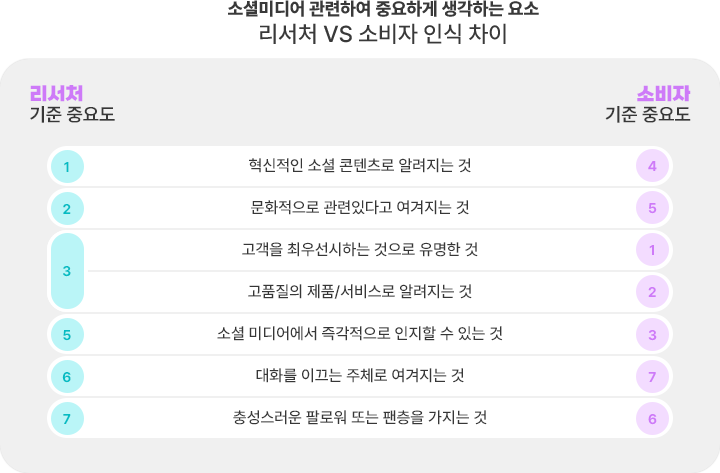
<style>
.page{position:relative;width:720px;height:473px;background:#ffffff}
.page>*{position:absolute;margin:0}
.t1{font:18px "Pretendard-ExtraBold";color:#393939;text-transform:uppercase}
.t2{font:22.9px "Pretendard-Medium";color:#393939;text-transform:uppercase}
.t3{font:18.8px "Pretendard-SemiBold";color:#373737;text-transform:uppercase}
.t4{font:18.8px "SBAggroB";color:#ce7af8;text-transform:uppercase}
.t5{font:16px/42px "Pretendard-Medium";color:#373737;text-transform:uppercase}
.t6{font:14px "Pretendard-Bold";color:#ce7af8}
.t7{font:14px "Pretendard-Bold";color:#04bcc3}
</style>
<div class="page">
<p class="t1" style="left:228px;top:0px;width:311px;height:44px;text-align:center">소셜미디어 관련하여 중요하게 생각하는 요소<br><span class="t2">리서처 VS 소비자 인식 차이</span></p>
<p class="t3" style="left:30px;top:85px;width:85px;height:38px"><span class="t4">리서처 <br></span>기준 중요도</p>
<p class="t3" style="left:605px;top:85px;width:86px;height:38px;text-align:right"><span class="t4">소비자<br></span>기준 중요도</p>
<p class="t5" style="left:217px;top:158px;width:286px;height:267px;text-align:center">혁신적인 소셜 콘텐츠로 알려지는 것<br>문화적으로 관련있다고 여겨지는 것<br>고객을 최우선시하는 것으로 유명한 것<br>고품질의 제품/서비스로 알려지는 것<br>소셜 미디어에서 즉각적으로 인지할 수 있는 것<br>대화를 이끄는 주체로 여겨지는 것<br>충성스러운 팔로워 또는 팬층을 가지는 것</p>
<p class="t6" style="left:648px;top:161px;width:9px;height:10px">4</p>
<p class="t7" style="left:64px;top:162px;width:5px;height:10px">1</p>
<p class="t7" style="left:63px;top:204px;width:8px;height:10px">2</p>
<p class="t6" style="left:648px;top:203px;width:9px;height:11px">5</p>
<p class="t6" style="left:649px;top:245px;width:5px;height:10px">1</p>
<p class="t7" style="left:63px;top:266px;width:8px;height:11px">3</p>
<p class="t6" style="left:648px;top:287px;width:8px;height:10px">2</p>
<p class="t7" style="left:63px;top:330px;width:8px;height:11px">5</p>
<p class="t6" style="left:648px;top:330px;width:9px;height:11px">3</p>
<p class="t7" style="left:62px;top:372px;width:9px;height:11px">6</p>
<p class="t6" style="left:648px;top:372px;width:8px;height:10px">7</p>
<p class="t7" style="left:63px;top:414px;width:8px;height:10px">7</p>
<p class="t6" style="left:648px;top:414px;width:9px;height:11px">6</p>
</div>
